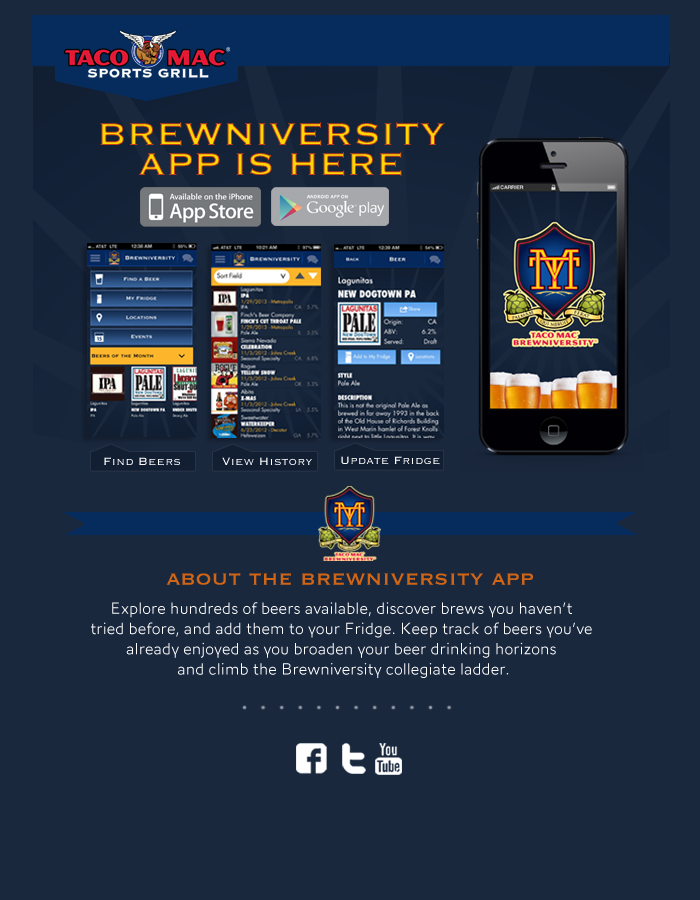
<style>
.page{position:relative;width:700px;height:900px;background:#1a283e}
.page>*{position:absolute;margin:0}
.t1{font:41.2px/30px "Copperplate"}
.t2{font:13.8px "Copperplate-Light";color:#ffffff}
.t3{font:25.4px "Copperplate";color:#d06515}
.t4{font:16.8px "AWConquerorSans-Light";color:#ffffff}
</style>
<div class="page">
<p class="t1" style="left:100px;top:122px;width:345px;height:54px;text-align:center">BREWNIVERSITY<br>APP IS HERE</p>
<p class="t2" style="left:104px;top:457px;width:76px;height:9px">Find Beers</p>
<p class="t2" style="left:222px;top:457px;width:90px;height:9px">View History</p>
<p class="t2" style="left:341px;top:456px;width:99px;height:9px">Update Fridge</p>
<p class="t3" style="left:166px;top:573px;width:367px;height:12px">about the brewniversity app</p>
<p class="t4" style="left:91px;top:602px;width:501px;height:76px;text-align:center">Explore hundreds of beers available, discover brews you haven’t <br>tried before, and add them to your Fridge. Keep track of beers you’ve <br>already enjoyed as you broaden your beer drinking horizons <br>and climb the Brewniversity collegiate ladder.</p>
</div>
